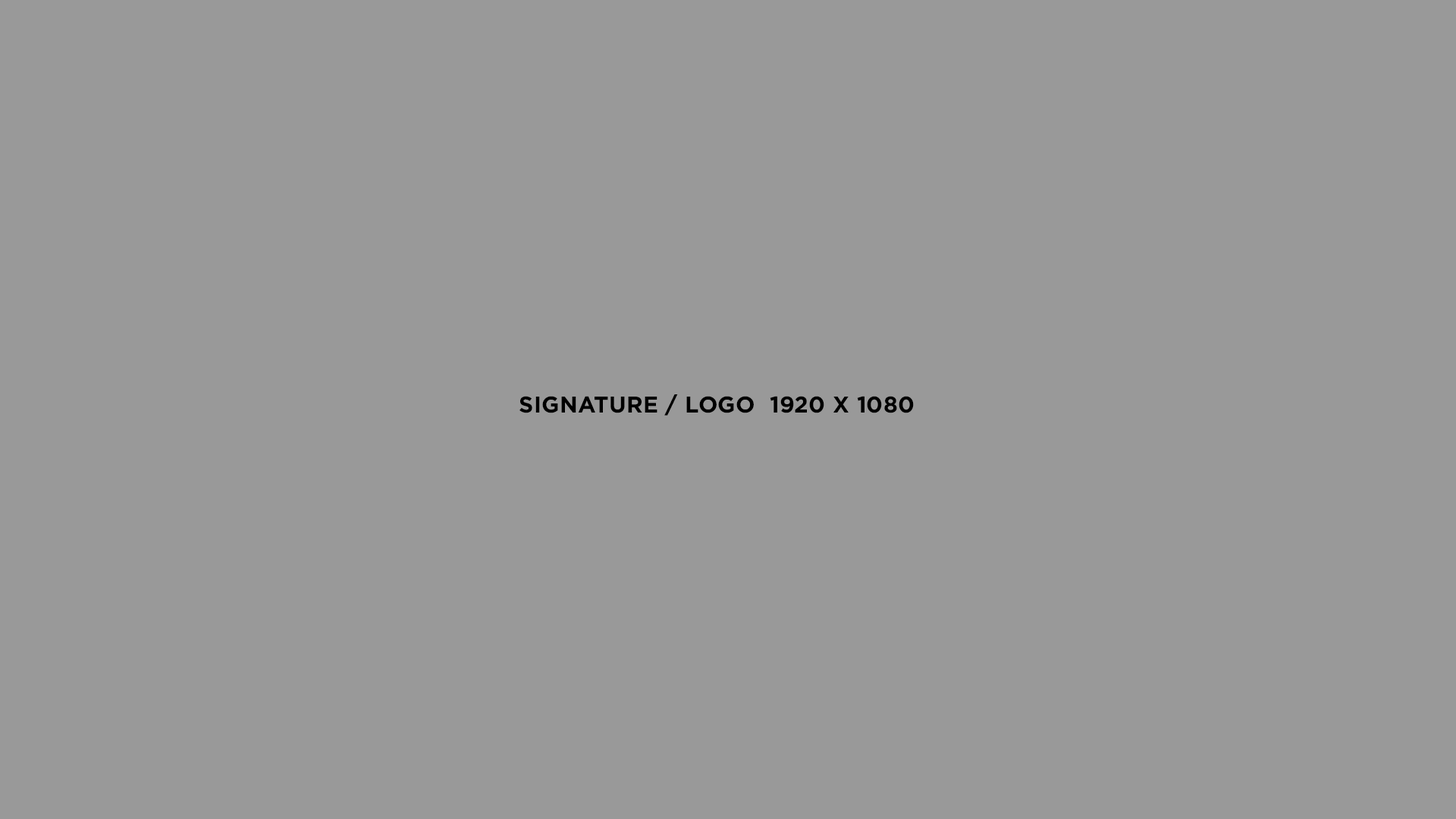
<style>
.page{position:relative;width:1456px;height:819px;background:#999999}
.page>*{position:absolute;margin:0}
.t1{font:22.7px "Gotham-Bold";letter-spacing:0.01em;color:#000000;text-transform:uppercase}
</style>
<div class="page">
<p class="t1" style="left:519px;top:394px;width:395px;height:22px">SIGNATURE / LOGO  1920 x 1080</p>
</div>
